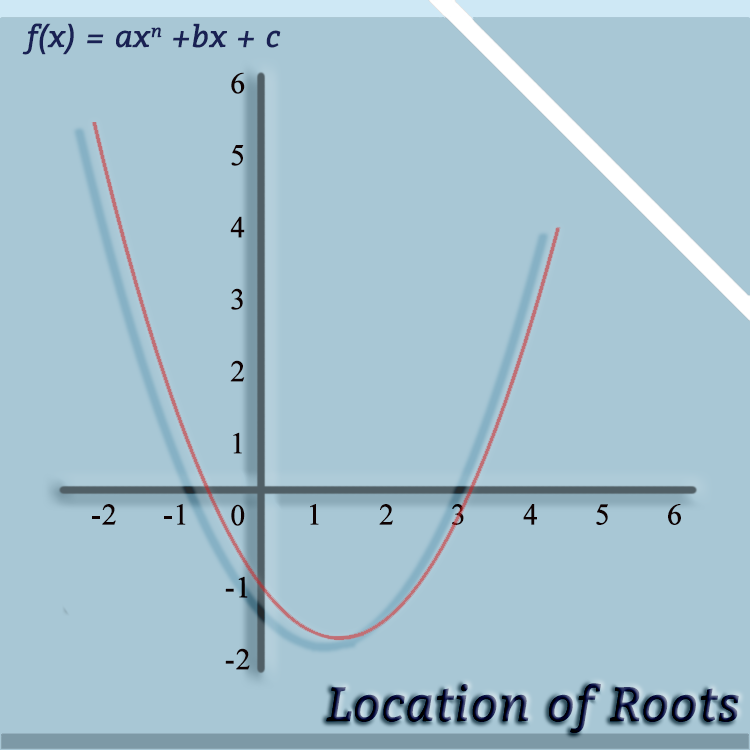
<style>
.page{position:relative;width:750px;height:750px;background:#a8c7d5}
.page>*{position:absolute;margin:0}
.t1{font:30px "Bitter-Italic";color:#192154;font-weight:bold}
.t2{font:30px "TimesNewRomanPSMT";color:#0e0101;font-weight:bold}
.t3{font:48px "Bitter-Italic";font-weight:bold}
</style>
<div class="page">
<p class="t1" style="left:22px;top:23px;width:259px;height:32px">f(x) = axn +bx + c</p>
<p class="t2" style="left:225px;top:72px;width:25px;height:598px;text-align:center">6<br><br>5<br><br>4<br><br>3<br><br>2<br><br>1<br><br>0<br><br>-1<br><br>-2</p>
<p class="t2" style="left:92px;top:504px;width:589px;height:21px">-2  -1    1  2  3  4  5  6</p>
<p class="t3" style="left:326px;top:683px;width:413px;height:50px">Location of Roots</p>
</div>
